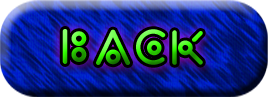
<style>
.page{position:relative;width:268px;height:97px}
.page>*{position:absolute;margin:0}
.t1{font:50px "wearealien!!"}
</style>
<div class="page">
<p class="t1" style="left:62px;top:29px;width:141px;height:36px">Back</p>
</div>
